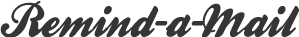
<style>
.page{position:relative;width:299px;height:37px;background:#ffffff}
.page>*{position:absolute;margin:0}
.t1{font:48px "BallparkWeiner";color:#353535}
</style>
<div class="page">
<p class="t1" style="left:0px;top:1px;width:299px;height:37px">Remind-a-Mail</p>
</div>
